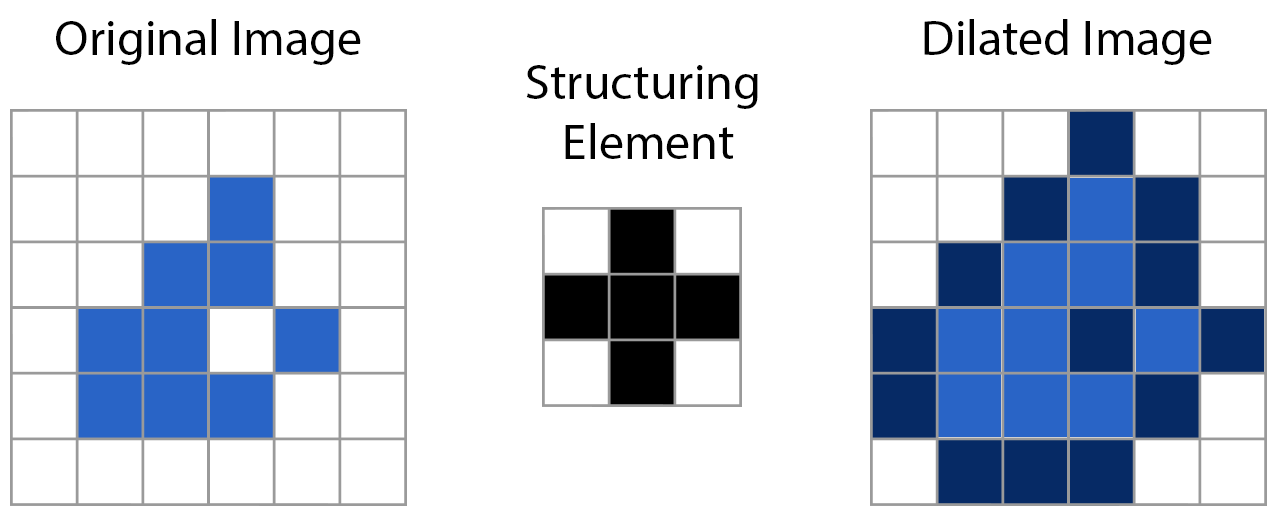
<style>
.page{position:relative;width:1282px;height:521px;background:#ffffff}
.page>*{position:absolute;margin:0}
.t1{font:12px "MyriadPro-Regular";color:#000000}
</style>
<div class="page">
<p class="t1" style="left:56px;top:19px;width:305px;height:46px">Original Image</p>
<p class="t1" style="left:924px;top:19px;width:288px;height:46px">Dilated Image</p>
<p class="t1" style="left:526px;top:65px;width:232px;height:94px;text-align:center">Structuring <br>Element</p>
</div>
